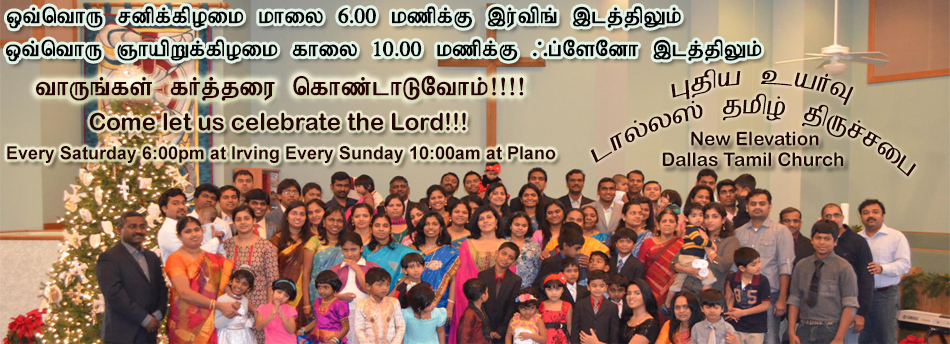
<style>
.page{position:relative;width:950px;height:344px}
.page>*{position:absolute;margin:0}
.t1{font:24px "Bamini-Plain";color:#000203;font-weight:bold}
.t2{font:28px "Bamini-Plain";color:#250403;font-weight:bold}
.t3{font:30.9px "Bamini-Plain";color:#250403;scale:0.83 1}
.t4{font:24px "ArialRoundedMTBold";color:#250403}
.t5{font:19px "ArialRoundedMTBold";color:#250403}
.t6{font:18px "Arial-BoldMT";color:#250403}
</style>
<div class="page">
<p class="t1" style="left:7px;top:6px;width:674px;height:23px">xt;nthU rdpf;fpoik khiy 6.00 kzpf;F ,u;tpq; ,lj;jpYk;</p>
<p class="t1" style="left:6px;top:39px;width:756px;height:23px">xt;nthU QhapWf;fpoik fhiy 10.00 kzpf;F /g;NsNdh ,lj;jpYk;</p>
<p class="t2" style="left:36px;top:75px;width:488px;height:26px">thUq;fs; fHj;jiu nfhz;lhLNthk;!!!!</p>
<p class="t3" style="left:671px;top:69px;width:183px;height:37px;rotate:32deg">Gjpa caHT</p>
<p class="t3" style="left:590px;top:93px;width:327px;height:84px;rotate:15deg">lhy;y]; jkpo; jpUr;rig</p>
<p class="t4" style="left:89px;top:112px;width:377px;height:19px">Come let us celebrate the Lord!!!</p>
<p class="t5" style="left:691px;top:131px;width:128px;height:15px">New Elevation</p>
<p class="t6" style="left:7px;top:146px;width:272px;height:17px">Every Saturday 6:00pm at Irving</p>
<p class="t6" style="left:286px;top:146px;width:270px;height:17px">Every Sunday 10:00am at Plano</p>
<p class="t5" style="left:662px;top:152px;width:182px;height:15px">Dallas Tamil Church</p>
</div>
